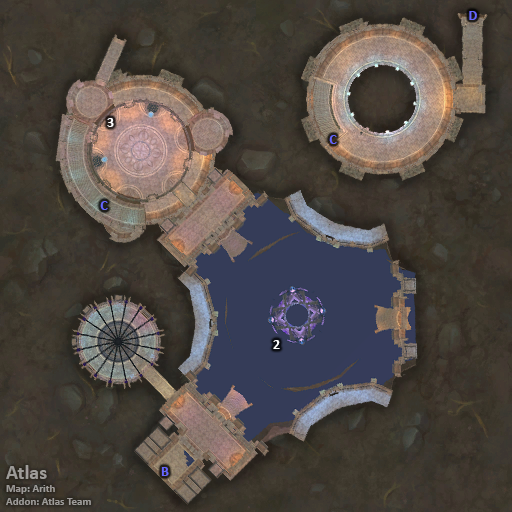
<style>
.page{position:relative;width:512px;height:512px}
.page>*{position:absolute;margin:0}
.t1{font:14px "Calibri-Bold";color:#6666ff}
.t2{font:14px "Calibri-Bold";color:#ffffff}
.t3{font:11px "Calibri-Bold";color:#9d9b98}
.t4{font:20px "Calibri-Bold";color:#9d9b98}
</style>
<div class="page">
<p class="t1" style="left:469px;top:11px;width:8px;height:9px">D</p>
<p class="t2" style="left:107px;top:118px;width:7px;height:9px">3</p>
<p class="t1" style="left:329px;top:135px;width:8px;height:9px">C</p>
<p class="t1" style="left:100px;top:201px;width:8px;height:9px">C</p>
<p class="t2" style="left:273px;top:340px;width:7px;height:9px">2</p>
<p class="t3" style="left:6px;top:465px;width:85px;height:40px"><span class="t4">Atlas<br></span>Map: Arith<br>Addon: Atlas Team</p>
<p class="t1" style="left:161px;top:467px;width:8px;height:9px">B</p>
</div>
